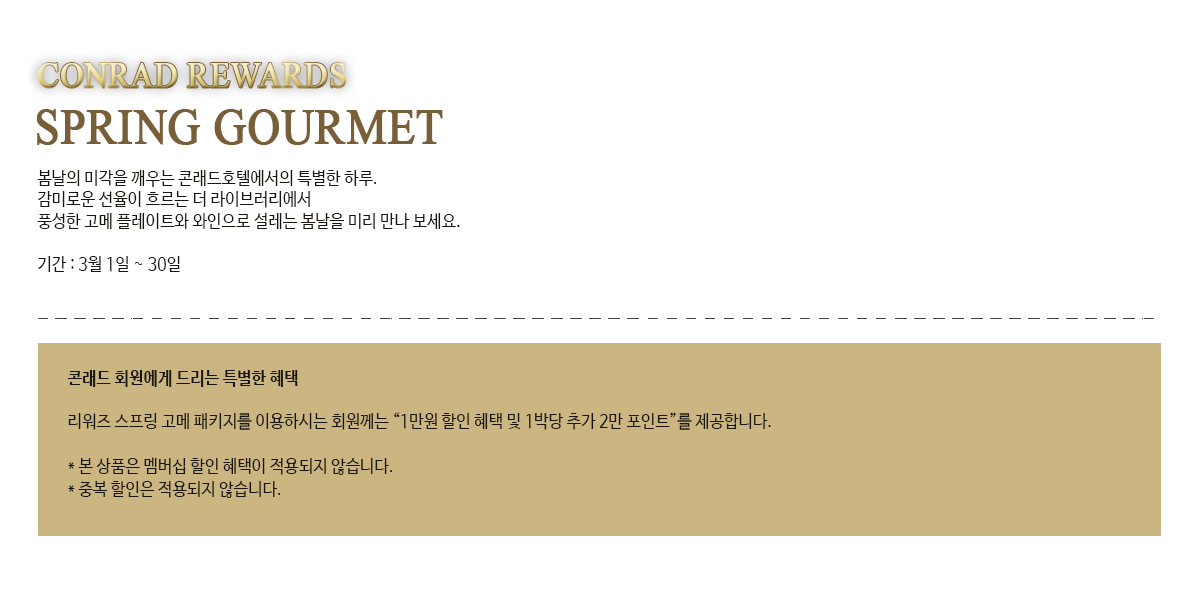
<style>
.page{position:relative;width:1200px;height:600px;background:#ffffff}
.page>*{position:absolute;margin:0}
.t1{font:36px "TimesNewRomanPSMT";font-weight:bold;scale:0.89 1}
.t2{font:50px "TimesNewRomanPSMT";color:#785f37;font-weight:bold;scale:0.9 1}
.t3{font:18px "NanumBarunGothic";color:#181510;scale:0.9 1}
.t4{font:18px "NanumBarunGothicBold";color:#181510;scale:0.9 1}
.t5{font:18px/23.2px "NanumBarunGothic";color:#181510;scale:0.9 1}
</style>
<div class="page">
<p class="t1" style="left:38px;top:63px;width:308px;height:25px">CONRAD REWARDS</p>
<p class="t2" style="left:36px;top:109px;width:407px;height:36px">SPRING GOURMET</p>
<p class="t3" style="left:37px;top:170px;width:423px;height:102px">봄날의 미각을 깨우는 콘래드호텔에서의 특별한 하루.<br>감미로운 선율이 흐르는 더 라이브러리에서<br>풍성한 고메 플레이트와 와인으로 설레는 봄날을 미리 만나 보세요.<br><br>기간 : 3월 1일 ~ 30일</p>
<p class="t3" style="left:67px;top:370px;width:704px;height:128px"><span class="t4">콘래드 회원에게 드리는 특별한 혜택<br></span><br>리워즈 스프링 고메 패키지를 이용하시는 회원께는 “1만원 할인 혜택 및 1박당 추가 2만 포인트”를 제공합니다.<br><br><span class="t5">* 본 상품은 멤버십 할인 혜택이 적용되지 않습니다. <br>* 중복 할인은 적용되지 않습니다.</span></p>
</div>
